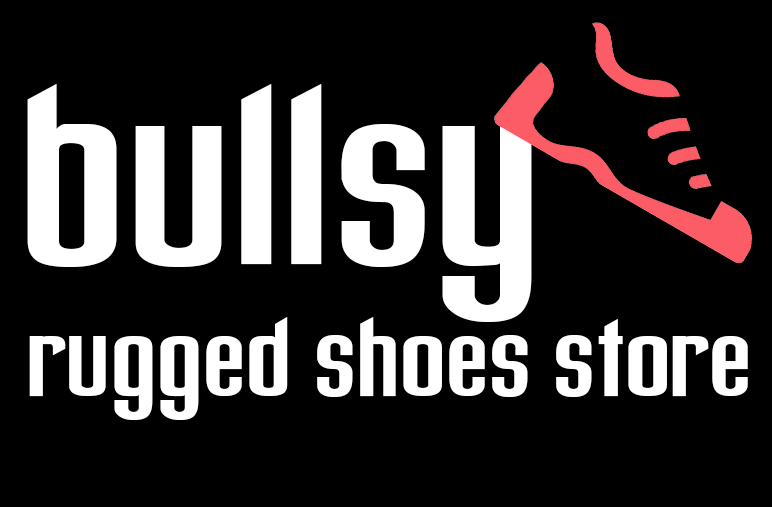
<style>
.page{position:relative;width:772px;height:507px;background:#000000}
.page>*{position:absolute;margin:0}
.t1{font:310px "FreakoutGobananasNormal";color:#ffffff}
.t2{font:132.3px "FreakoutGobananasNormal";color:#ffffff}
</style>
<div class="page">
<p class="t1" style="left:27px;top:84px;width:505px;height:238px">bullsy</p>
<p class="t2" style="left:29px;top:317px;width:719px;height:103px">rugged shoes store</p>
</div>
